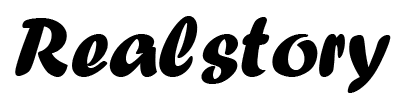
<style>
.page{position:relative;width:400px;height:100px;background:#ffffff}
.page>*{position:absolute;margin:0}
.t1{font:89.8px "ForteMT";color:#000000}
</style>
<div class="page">
<p class="t1" style="left:15px;top:16px;width:376px;height:77px">Realstory</p>
</div>
